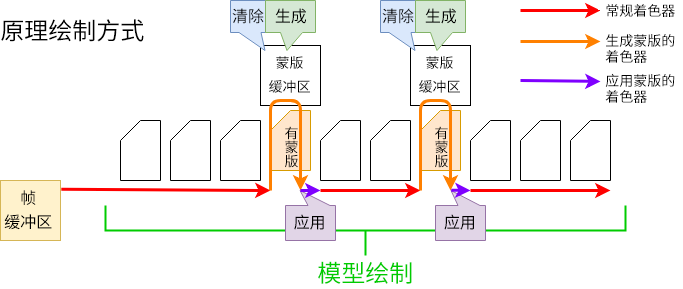
<style>
.page{position:relative;width:683px;height:289px;background:#ffffff}
.page>*{position:absolute;margin:0}
.t1{font:14px/24px "SourceHanSansSC-Regular";color:#000000}
.t2{font:14px/30px "SourceHanSansSC-Regular";color:#000000}
.t3{font:14px/16px "SourceHanSansSC-Regular";color:#000000}
.t4{font:16px "SourceHanSansSC-Regular";color:#000000}
.t5{font:24px "SourceHanSansSC-Regular";color:#000000}
.t6{font:14px/14px "SourceHanSansSC-Regular";color:#000000}
.t7{font:16px/24px "SourceHanSansSC-Regular";color:#000000}
.t8{font:24px "SourceHanSansSC-Regular";color:#00cc00}
</style>
<div class="page">
<p class="t1" style="left:605px;top:4px;width:70px;height:99px">常规着色器<br><span class="t2">生成蒙版的<br></span><span class="t3">着色器<br></span>应用蒙版的<br><span class="t3">着色器</span></p>
<p class="t4" style="left:232px;top:8px;width:74px;height:16px">清除   生成</p>
<p class="t4" style="left:382px;top:8px;width:74px;height:16px">清除   生成</p>
<p class="t5" style="left:1px;top:19px;width:143px;height:23px">原理绘制方式</p>
<p class="t1" style="left:269px;top:56px;width:41px;height:37px;text-align:center">蒙版<br>缓冲区</p>
<p class="t1" style="left:419px;top:56px;width:41px;height:37px;text-align:center">蒙版<br>缓冲区</p>
<p class="t6" style="left:285px;top:126px;width:13px;height:42px;text-align:center">有<br>蒙<br>版</p>
<p class="t6" style="left:435px;top:126px;width:13px;height:42px;text-align:center">有<br>蒙<br>版</p>
<p class="t7" style="left:4px;top:190px;width:48px;height:40px">帧<br>缓冲区</p>
<p class="t4" style="left:294px;top:214px;width:180px;height:16px">应用                                 应用</p>
<p class="t8" style="left:318px;top:261px;width:94px;height:23px">模型绘制</p>
</div>
